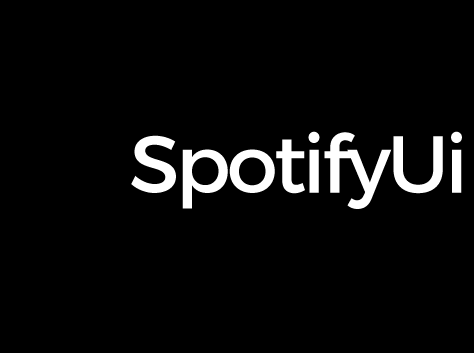
<style>
.page{position:relative;width:474px;height:353px;background:#000000}
.page>*{position:absolute;margin:0}
.t1{font:80.8px "Montserrat-Regular";letter-spacing:-0.05em;color:#ffffff}
</style>
<div class="page">
<p class="t1" style="left:131px;top:131px;width:331px;height:78px">SpotifyUi</p>
</div>
